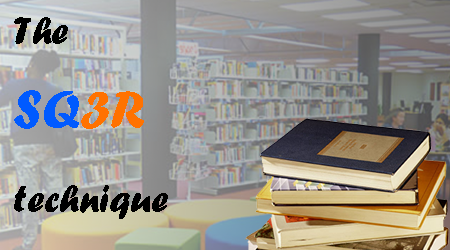
<style>
.page{position:relative;width:450px;height:250px}
.page>*{position:absolute;margin:0}
.t1{font:39.7px "ForteMT";color:#000000}
.t2{font:56.4px "ForteMT";color:#005aff}
.t3{font:56.4px "ForteMT";color:#ff7200}
</style>
<div class="page">
<p class="t1" style="left:14px;top:17px;width:154px;height:202px">The <br><span class="t2">SQ</span><span class="t3">3R<br></span>technique</p>
</div>
